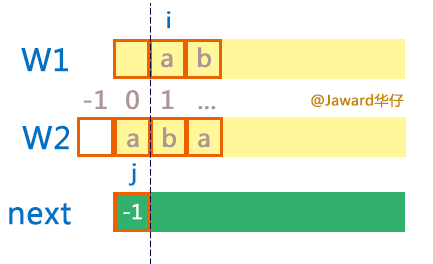
<style>
.page{position:relative;width:433px;height:264px;background:#ffffff}
.page>*{position:absolute;margin:0}
.t1{font:21.3px "MicrosoftYaHei";color:#0072c6;font-weight:bold}
.t2{font:30px "MicrosoftYaHei";color:#0072c6;font-weight:bold}
.t3{font:24.3px "MicrosoftYaHei";color:#af9696;font-weight:bold}
.t4{font:14px "MicrosoftYaHei";color:#c68700;font-weight:bold}
.t5{font:19.8px "MicrosoftYaHei";color:#ffffff;font-weight:bold}
</style>
<div class="page">
<p class="t1" style="left:167px;top:11px;width:4px;height:18px">i</p>
<p class="t2" style="left:21px;top:47px;width:47px;height:25px">W1</p>
<p class="t3" style="left:161px;top:53px;width:12px;height:15px">a</p>
<p class="t3" style="left:198px;top:47px;width:13px;height:21px">b</p>
<p class="t3" style="left:83px;top:90px;width:24px;height:19px">-1</p>
<p class="t3" style="left:126px;top:90px;width:13px;height:20px">0</p>
<p class="t3" style="left:162px;top:90px;width:12px;height:19px">1</p>
<p class="t4" style="left:311px;top:93px;width:93px;height:15px">@Jaward华仔</p>
<p class="t3" style="left:198px;top:106px;width:18px;height:4px">...</p>
<p class="t2" style="left:22px;top:125px;width:47px;height:25px">W2</p>
<p class="t3" style="left:127px;top:133px;width:12px;height:15px">a</p>
<p class="t3" style="left:163px;top:127px;width:13px;height:21px">b</p>
<p class="t3" style="left:198px;top:133px;width:12px;height:15px">a</p>
<p class="t1" style="left:128px;top:163px;width:8px;height:23px">j</p>
<p class="t2" style="left:9px;top:202px;width:62px;height:23px">next</p>
<p class="t5" style="left:123px;top:203px;width:19px;height:17px">-1</p>
</div>
